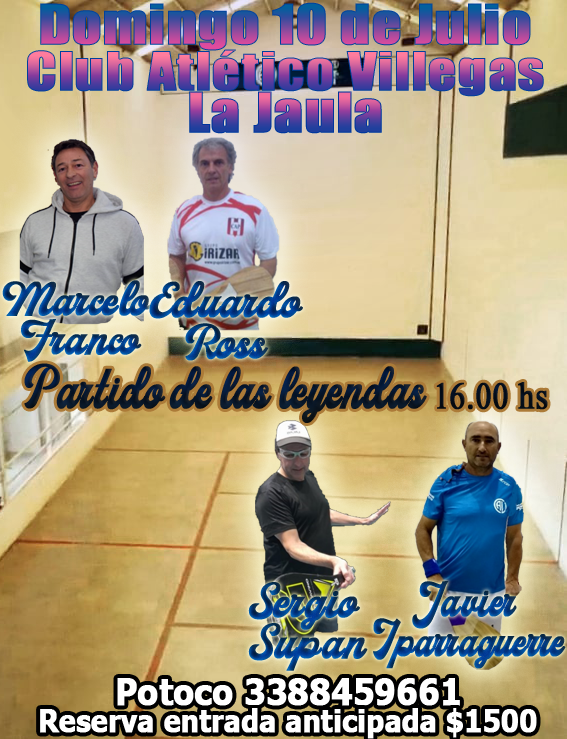
<style>
.page{position:relative;width:567px;height:739px}
.page>*{position:absolute;margin:0}
.t1{font:51.2px "Impact";font-weight:bold;scale:1.13 1}
.t2{font:49.4px "Impact";font-weight:bold;scale:1.13 1}
.t3{font:46.5px/39.9px "MilestoneFreeVersion-Script";font-weight:bold}
.t4{font:48.1px/41.3px "MilestoneFreeVersion-Script";font-weight:bold}
.t5{font:55.8px "MilestoneFreeVersion-Script";color:#07172a;font-weight:bold;scale:0.83 1}
.t6{font:55.8px "Microsoft-Himalaya";color:#07172a;font-weight:bold;scale:0.83 1}
.t7{font:46.5px/39.9px "MilestoneFreeVersion-Script";font-weight:bold;scale:0.87 1}
.t8{font:36.6px "Tahoma-Bold";color:#ffffff;font-weight:bold;scale:0.89 1}
.t9{font:30.8px "Tahoma-Bold";color:#ffffff;font-weight:bold;scale:0.89 1}
</style>
<div class="page">
<p class="t1" style="left:40px;top:2px;width:491px;height:49px">Domingo 10 de Julio</p>
<p class="t2" style="left:27px;top:49px;width:517px;height:48px">Club Atlético Villegas</p>
<p class="t1" style="left:189px;top:91px;width:193px;height:43px">La Jaula</p>
<p class="t3" style="left:2px;top:280px;width:150px;height:82px;text-align:center">Marcelo <br>Franco</p>
<p class="t4" style="left:149px;top:281px;width:154px;height:80px;text-align:center">Eduardo<br>Ross</p>
<p class="t5" style="left:24px;top:363px;width:524px;height:60px">Partido de las leyendas <span class="t6">16.00 hs</span></p>
<p class="t4" style="left:248px;top:582px;width:120px;height:89px;text-align:center">Sergio <br>Supan</p>
<p class="t7" style="left:373px;top:581px;width:193px;height:88px;text-align:center">Javier <br>Iparraguerre</p>
<p class="t8" style="left:117px;top:678px;width:343px;height:28px">Potoco 3388459661</p>
<p class="t9" style="left:40px;top:708px;width:497px;height:31px">Reserva entrada anticipada $1500</p>
</div>
